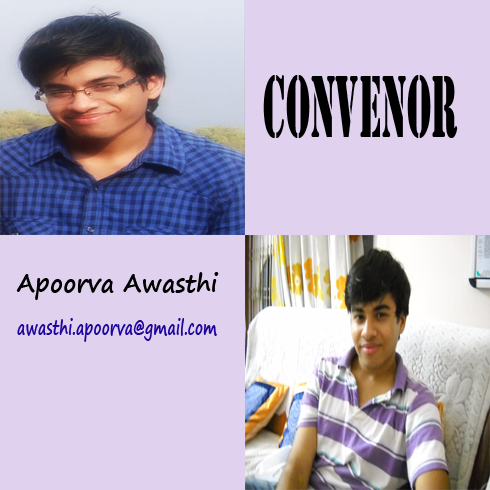
<style>
.page{position:relative;width:490px;height:490px;background:#e0d2ee}
.page>*{position:absolute;margin:0}
.t1{font:91.5px "Stencil";color:#000000;scale:0.42 1}
.t2{font:25.2px "SegoePrint-Bold";color:#000000;scale:0.92 1}
.t3{font:20.7px "SegoePrint-Bold";color:#1e059d;scale:0.69 1}
</style>
<div class="page">
<p class="t1" style="left:263px;top:75px;width:195px;height:63px">convenor</p>
<p class="t2" style="left:16px;top:272px;width:203px;height:28px">Apoorva Awasthi</p>
<p class="t3" style="left:17px;top:318px;width:200px;height:24px">awasthi.apoorva@gmail.com</p>
</div>
